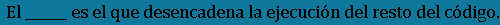
<style>
.page{position:relative;width:500px;height:25px;background:#0f789b}
.page>*{position:absolute;margin:0}
.t1{font:18px "CambriaMath";color:#020202}
</style>
<div class="page">
<p class="t1" style="left:7px;top:5px;width:492px;height:17px">El ______ es el que desencadena la ejecución del resto del código.</p>
</div>
